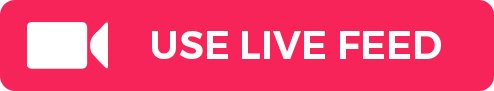
<style>
.page{position:relative;width:494px;height:91px;background:#f62459}
.page>*{position:absolute;margin:0}
.t1{font:39.1px "Montserrat-SemiBold";color:#fefefe}
</style>
<div class="page">
<p class="t1" style="left:152px;top:31px;width:289px;height:28px">USE LIVE FEED</p>
</div>
